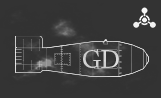
<style>
.page{position:relative;width:161px;height:98px;background:#333333}
.page>*{position:absolute;margin:0}
.t1{font:24px "Minipax-Regular";color:#d1d1d1}
</style>
<div class="page">
<p class="t1" style="left:83px;top:49px;width:36px;height:20px">GD</p>
</div>
